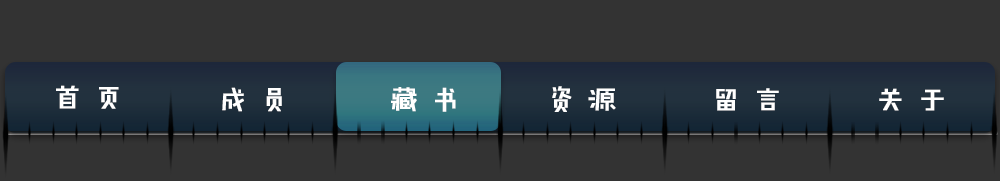
<style>
.page{position:relative;width:1000px;height:181px;background:#333333}
.page>*{position:absolute;margin:0}
.t1{font:29.5px "FZJHJW--GB1-0";letter-spacing:0.38em;color:#ffffff;font-weight:bold}
.t2{font:29.7px "FZJHJW--GB1-0";letter-spacing:0.38em;color:#ffffff;font-weight:bold}
</style>
<div class="page">
<p class="t1" style="left:56px;top:85px;width:63px;height:24px">首页</p>
<p class="t1" style="left:222px;top:87px;width:60px;height:25px">成员</p>
<p class="t2" style="left:391px;top:87px;width:65px;height:25px">藏书</p>
<p class="t2" style="left:552px;top:86px;width:64px;height:26px">资源</p>
<p class="t2" style="left:716px;top:88px;width:63px;height:23px">留言</p>
<p class="t2" style="left:879px;top:88px;width:65px;height:23px">关于</p>
</div>
